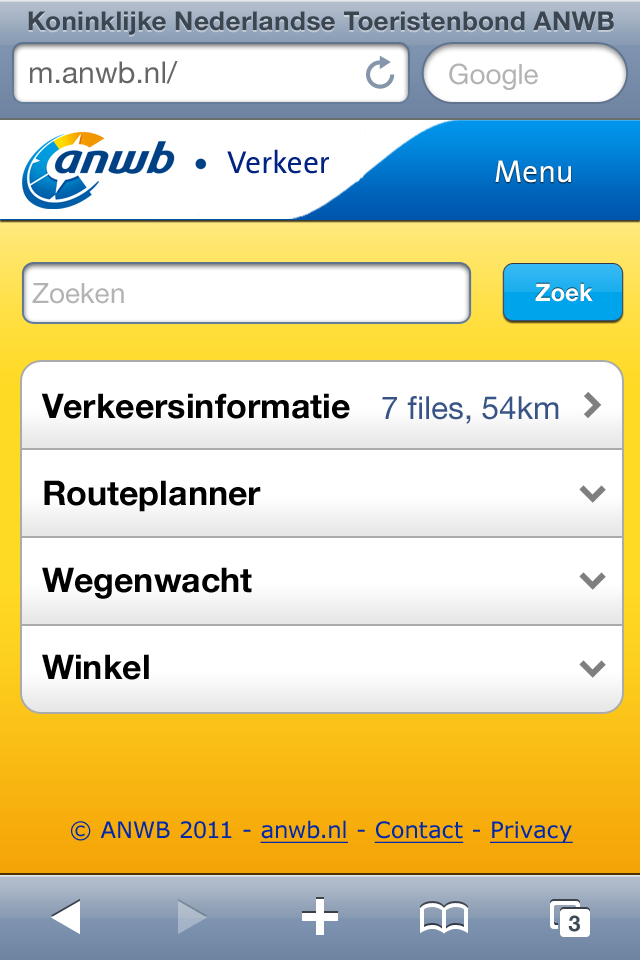
<style>
.page{position:relative;width:640px;height:960px;background:#ffffff}
.page>*{position:absolute;margin:0}
.t1{font:26px "HelveticaNeue-Bold";letter-spacing:0.01em;color:#3c4651}
.t2{font:30px "HelveticaNeue";color:#666666}
.t3{font:28px "HelveticaNeue";color:#b3b3b3}
.t4{font:31.7px "AnwbTheSans";letter-spacing:0.01em;color:#002280}
.t5{font:31.7px "AnwbTheSans";letter-spacing:0.01em;color:#ffffff}
.t6{font:28px "HelveticaNeue";color:#b4b3b4}
.t7{font:24px "HelveticaNeue-Bold";color:#ffffff}
.t8{font:34px/87px "HelveticaNeue-Bold";color:#000000}
.t9{font:31.7px "HelveticaNeue";color:#385487}
.t10{font:22.6px "Verdana";letter-spacing:0.01em;color:#0028aa}
.t11{font:22.6px "Verdana";letter-spacing:0.01em;color:#0028aa;text-decoration:underline}
.t12{font:22px "HelveticaNeue-Bold";color:#3e4a58}
</style>
<div class="page">
<p class="t1" style="left:28px;top:11px;width:586px;height:24px">Koninklijke Nederlandse Toeristenbond ANWB</p>
<p class="t2" style="left:30px;top:61px;width:148px;height:23px">m.anwb.nl/</p>
<p class="t3" style="left:449px;top:63px;width:89px;height:27px">Google</p>
<p class="t4" style="left:227px;top:149px;width:102px;height:25px">Verkeer</p>
<p class="t5" style="left:495px;top:160px;width:76px;height:23px">Menu</p>
<p class="t6" style="left:32px;top:283px;width:92px;height:21px">Zoeken</p>
<p class="t7" style="left:535px;top:283px;width:58px;height:19px">Zoek</p>
<p class="t8" style="left:41px;top:393px;width:309px;height:287px">Verkeersinformatie<br>Routeplanner<br>Wegenwacht<br>Winkel</p>
<p class="t9" style="left:382px;top:396px;width:177px;height:28px">7 files, 54km</p>
<p class="t10" style="left:71px;top:820px;width:502px;height:23px">© ANWB 2011 - <span class="t11">anwb.nl</span> - <span class="t11">Contact</span> - <span class="t11">Privacy</span></p>
<p class="t12" style="left:568px;top:915px;width:12px;height:17px">3</p>
</div>
